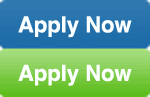
<style>
.page{position:relative;width:150px;height:97px}
.page>*{position:absolute;margin:0}
.t1{font:22px/48.5px "Helvetica-Bold";color:#fbffff}
</style>
<div class="page">
<p class="t1" style="left:18px;top:16px;width:114px;height:70px">Apply Now<br>Apply Now</p>
</div>
